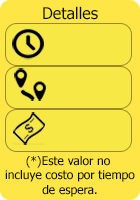
<style>
.page{position:relative;width:140px;height:200px;background:#f7e845}
.page>*{position:absolute;margin:0}
.t1{font:16px "Tahoma";color:#061206}
.t2{font:12px "Tahoma";color:#061206}
</style>
<div class="page">
<p class="t1" style="left:43px;top:6px;width:55px;height:14px">Detalles</p>
<p class="t2" style="left:5px;top:156px;width:130px;height:41px;text-align:center">(*)Este valor no<br> incluye costo por tiempo<br> de espera.</p>
</div>
